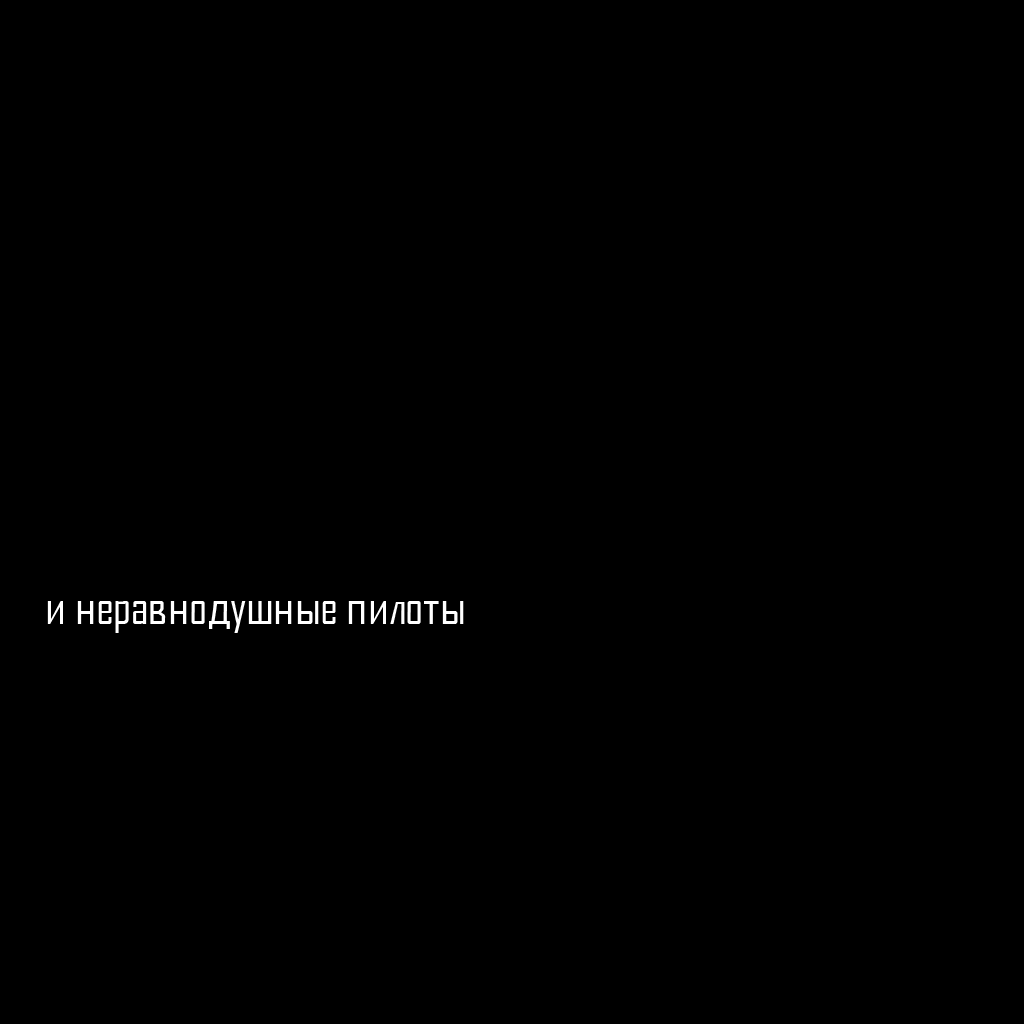
<style>
.page{position:relative;width:1024px;height:1024px;background:#000000}
.page>*{position:absolute;margin:0}
.t1{font:48px "AgencyFBCyrillic";color:#ffffff}
</style>
<div class="page">
<p class="t1" style="left:47px;top:601px;width:417px;height:32px">и неравнодушные пилоты</p>
</div>
